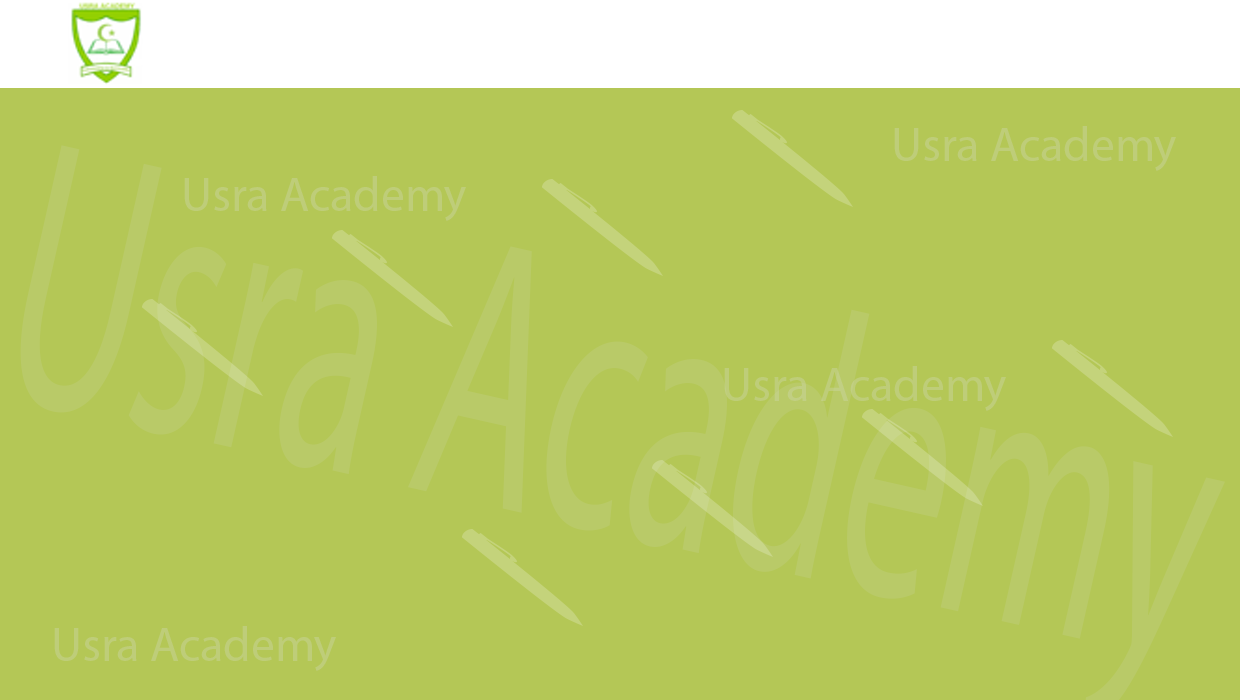
<style>
.page{position:relative;width:1240px;height:700px;background:#b4c756}
.page>*{position:absolute;margin:0}
.t1{font:48px "MyriadPro-Regular";color:#becd79}
</style>
<div class="page">
<p class="t1" style="left:894px;top:126px;width:282px;height:45px">Usra Academy</p>
<p class="t1" style="left:184px;top:176px;width:282px;height:45px">Usra Academy</p>
<p class="t1" style="left:724px;top:366px;width:282px;height:45px">Usra Academy</p>
<p class="t1" style="left:54px;top:626px;width:282px;height:45px">Usra Academy</p>
</div>
